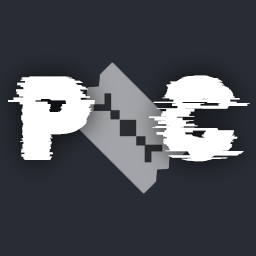
<style>
.page{position:relative;width:256px;height:256px;background:#282c34}
.page>*{position:absolute;margin:0}
.t1{font:119px "RubikGlitch-Regular";letter-spacing:-0.02em;color:#ffffff;scale:0.9 1}
</style>
<div class="page">
<p class="t1" style="left:8px;top:75px;width:242px;height:87px">P    C</p>
</div>
